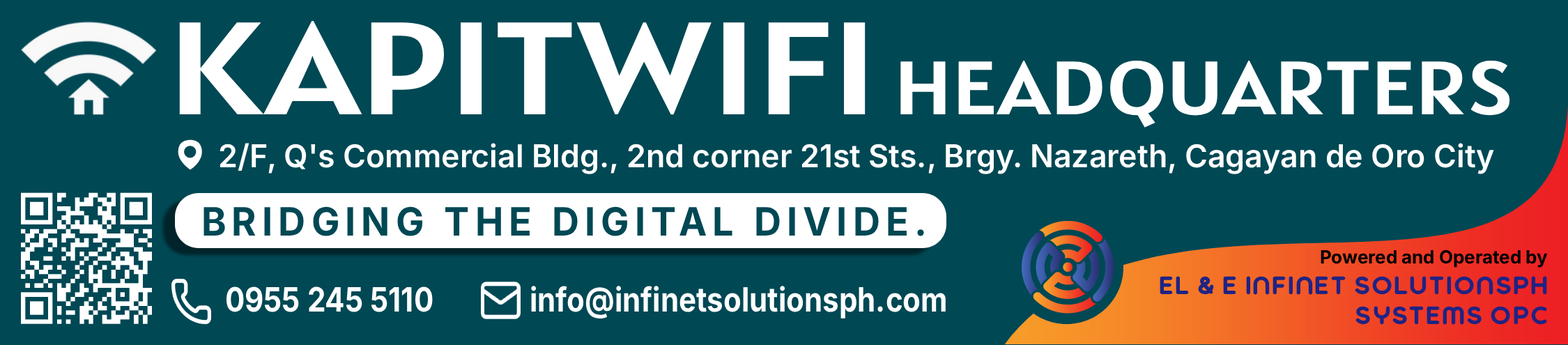
<style>
.page{position:relative;width:1568px;height:345px;background:#004854}
.page>*{position:absolute;margin:0}
.t1{font:131.8px "Alatsi-Regular";color:#ffffff;scale:1.24 1}
.t2{font:75.7px "Alatsi-Regular";color:#ffffff;scale:1.21 1}
.t3{font:31.5px "Inter-SemiBold";color:#ffffff}
.t4{font:39px "Inter-Bold";letter-spacing:0.15em;color:#004854;scale:0.97 1}
.t5{font:18.1px "Inter-Bold";color:#000000}
.t6{font:25.1px "aero-bc-bold";letter-spacing:0.05em;color:#202384;scale:1.06 1}
.t7{font:33.5px "Inter-Bold";color:#ffffff;scale:0.88 1}
</style>
<div class="page">
<p class="t1" style="left:179px;top:21px;width:687px;height:94px">KAPITWIFI</p>
<p class="t2" style="left:900px;top:61px;width:610px;height:67px">HEADQUARTERS</p>
<p class="t3" style="left:220px;top:143px;width:1274px;height:31px">2/F, Q's Commercial Bldg., 2nd corner 21st Sts., Brgy. Nazareth, Cagayan de Oro City</p>
<p class="t4" style="left:203px;top:206px;width:721px;height:30px">BRIDGING THE DIGITAL DIVIDE.</p>
<p class="t5" style="left:1321px;top:249px;width:227px;height:19px">Powered and Operated by</p>
<p class="t6" style="left:1160px;top:276px;width:387px;height:49px;text-align:right">EL &amp; E INFINET SOLUTIONSPH<br>SYSTEMS OPC</p>
<p class="t7" style="left:226px;top:286px;width:207px;height:26px">0955 245 5110</p>
<p class="t7" style="left:531px;top:286px;width:415px;height:32px">info@infinetsolutionsph.com</p>
</div>
